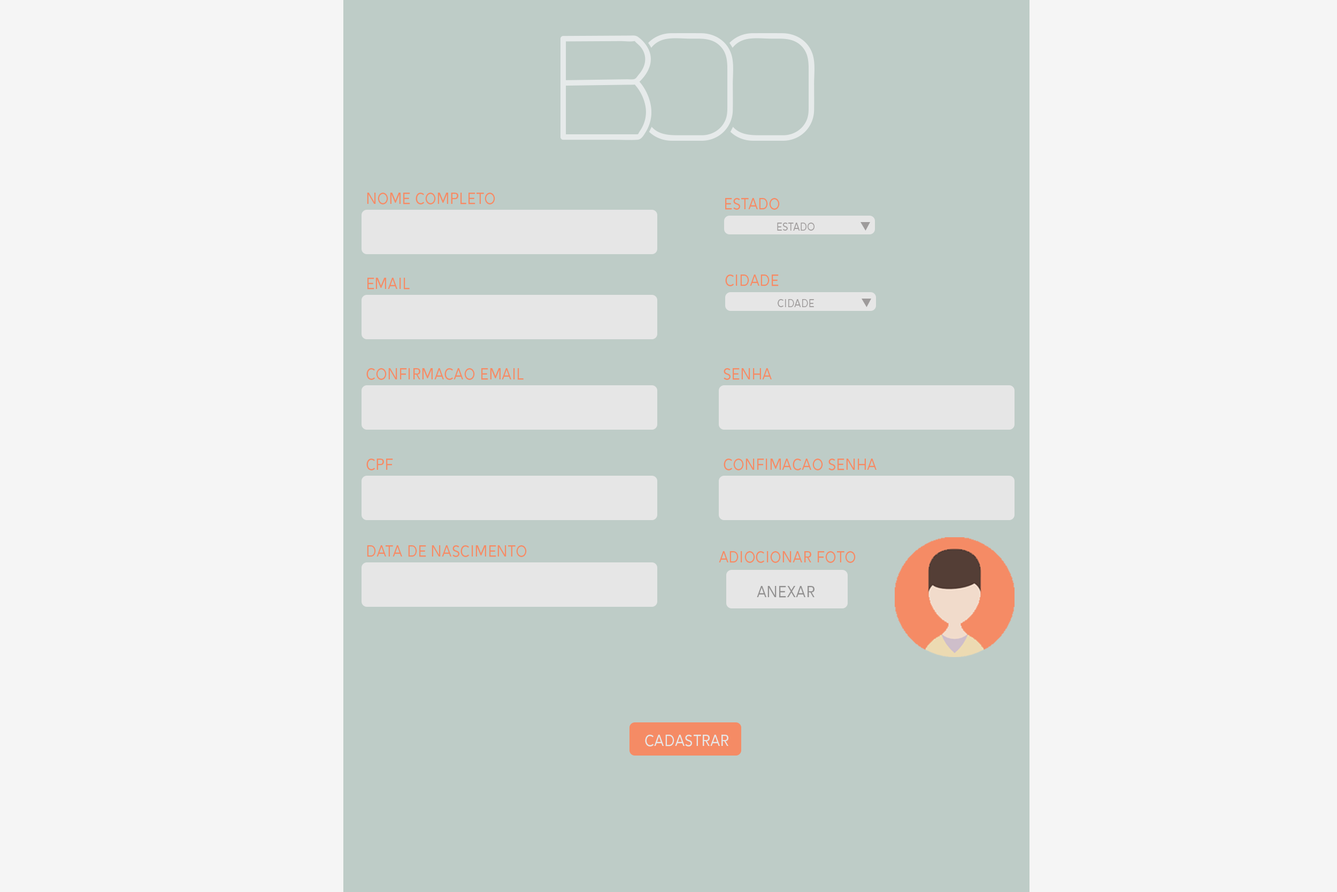
<style>
.page{position:relative;width:1337px;height:892px;background:#f5f5f5}
.page>*{position:absolute;margin:0}
.t1{font:19.3px "Alesand-Regular";color:#f58b65}
.t2{font:13.1px "Alesand-Regular";color:#9e9b9b}
.t3{font:19.3px "Alesand-Regular";color:#929191}
.t4{font:19.3px "Alesand-Regular";color:#e6e6e6}
</style>
<div class="page">
<p class="t1" style="left:367px;top:193px;width:128px;height:11px">NOME COMPLETO</p>
<p class="t1" style="left:725px;top:198px;width:55px;height:12px">ESTADO</p>
<p class="t2" style="left:777px;top:223px;width:38px;height:8px">ESTADO</p>
<p class="t1" style="left:367px;top:278px;width:43px;height:11px">EMAIL</p>
<p class="t1" style="left:725px;top:274px;width:54px;height:12px">CIDADE</p>
<p class="t2" style="left:778px;top:299px;width:36px;height:8px">CIDADE</p>
<p class="t1" style="left:366px;top:368px;width:158px;height:12px">CONFIRMACAO EMAIL</p>
<p class="t1" style="left:724px;top:368px;width:48px;height:12px">SENHA</p>
<p class="t1" style="left:366px;top:458px;width:27px;height:12px">CPF</p>
<p class="t1" style="left:724px;top:458px;width:153px;height:12px">CONFIMACAO SENHA</p>
<p class="t1" style="left:367px;top:545px;width:160px;height:12px">data de nascimento</p>
<p class="t1" style="left:719px;top:551px;width:137px;height:12px">ADIOCIONAR FOTO</p>
<p class="t3" style="left:757px;top:586px;width:58px;height:11px">ANEXAR</p>
<p class="t4" style="left:645px;top:734px;width:84px;height:12px">CADASTRAR</p>
</div>
